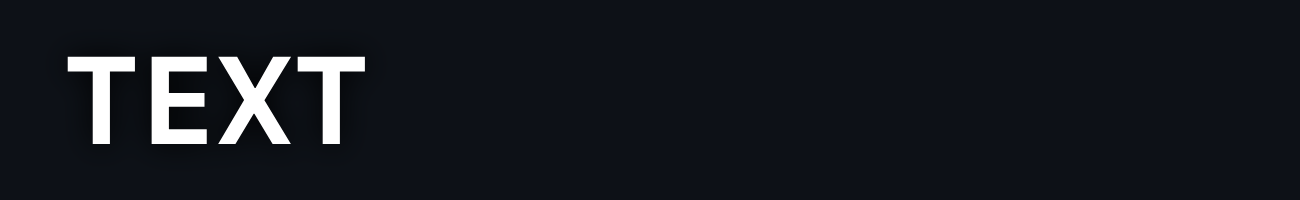
<style>
.page{position:relative;width:1300px;height:200px;background:#0d1117}
.page>*{position:absolute;margin:0}
.t1{font:124px "SFMonoNerdFontComplete-Bold";color:#ffffff}
</style>
<div class="page">
<p class="t1" style="left:67px;top:56px;width:298px;height:88px">TEXT</p>
</div>
